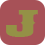
<style>
.page{position:relative;width:45px;height:45px;background:#a75157}
.page>*{position:absolute;margin:0}
.t1{font:50px "Saddlebag-Black";color:#949146}
</style>
<div class="page">
<p class="t1" style="left:6px;top:10px;width:32px;height:27px">J</p>
</div>
